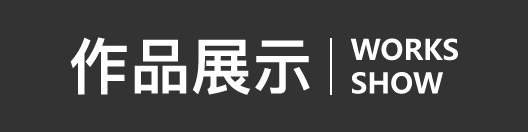
<style>
.page{position:relative;width:528px;height:132px;background:#333333}
.page>*{position:absolute;margin:0}
.t1{font:61px "PingFangSC-Heavy";color:#ffffff}
.t2{font:27.9px "MicrosoftYaHei-Bold";color:#ffffff}
</style>
<div class="page">
<p class="t1" style="left:70px;top:37px;width:240px;height:58px">作品展示</p>
<p class="t2" style="left:350px;top:38px;width:108px;height:56px">WORKS<br>SHOW</p>
</div>
